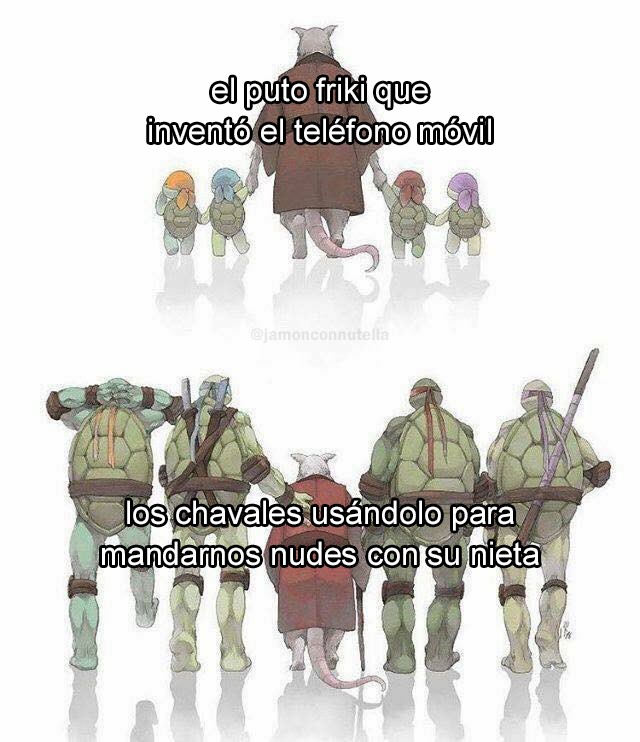
<style>
.page{position:relative;width:640px;height:742px;background:#fefefe}
.page>*{position:absolute;margin:0}
.t1{font:32.2px "ArialMT";color:#ffffff}
.t2{font:17.1px "FranklinGothic-Demi";color:#e5e5e5}
</style>
<div class="page">
<p class="t1" style="left:149px;top:77px;width:342px;height:66px;text-align:center">el puto friki que<br>inventó el teléfono móvil</p>
<p class="t2" style="left:251px;top:328px;width:138px;height:15px">@jamonconnutella</p>
<p class="t1" style="left:102px;top:500px;width:437px;height:66px;text-align:center">los chavales usándolo para<br>mandarnos nudes con su nieta</p>
</div>
